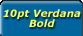
<style>
.page{position:relative;width:83px;height:36px;background:#00659c}
.page>*{position:absolute;margin:0}
.t1{font:10px/10px "Verdana-BoldItalic";letter-spacing:0.02em;color:#fbfb5f}
</style>
<div class="page">
<p class="t1" style="left:3px;top:9px;width:78px;height:18px;text-align:center">10pt Verdana<br>Bold</p>
</div>
